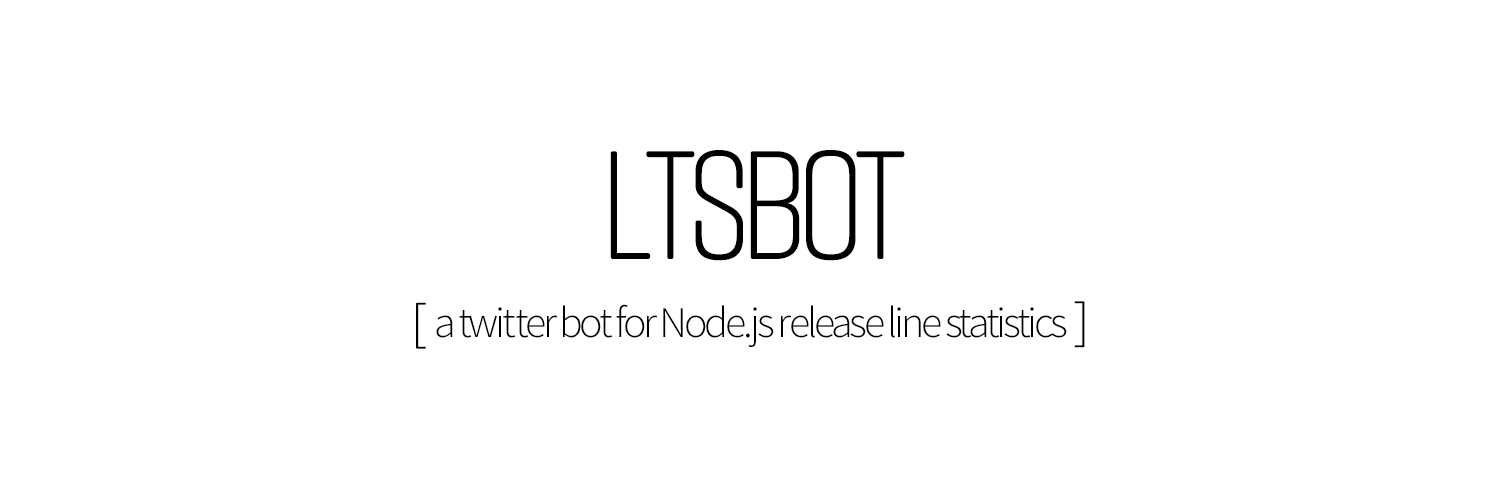
<style>
.page{position:relative;width:1500px;height:500px;background:#ffffff}
.page>*{position:absolute;margin:0}
.t1{font:154px "RiftSoft-Light";letter-spacing:-0.075em;color:#000000;text-transform:uppercase}
.t2{font:154px "RiftSoft-Light";color:#000000;text-transform:uppercase}
.t3{font:154px "RiftSoft-Light";letter-spacing:-0.06em;color:#000000;text-transform:uppercase}
.t4{font:154px "RiftSoft-Light";letter-spacing:0.12em;color:#000000;text-transform:uppercase}
.t5{font:58px "RiftSoft-Light";color:#000000;text-transform:uppercase}
.t6{font:44px "SourceSansPro-Light";letter-spacing:-0.075em;color:#000000}
</style>
<div class="page">
<p class="t1" style="left:610px;top:150px;width:295px;height:111px"><span class="t2">L</span><span class="t3">T</span>Sbo<span class="t4">t</span></p>
<p class="t5" style="left:416px;top:302px;width:10px;height:47px">[</p>
<p class="t6" style="left:436px;top:304px;width:631px;height:43px">a twitter bot for Node.js release line statistics</p>
<p class="t5" style="left:1074px;top:301px;width:11px;height:47px;rotate:180deg">[</p>
</div>
